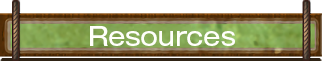
<style>
.page{position:relative;width:322px;height:61px;background:#ffffff}
.page>*{position:absolute;margin:0}
.t1{font:25px "GothicMB101Pro-Medium";color:#fffffa}
</style>
<div class="page">
<p class="t1" style="left:90px;top:26px;width:145px;height:20px">Resources</p>
</div>
